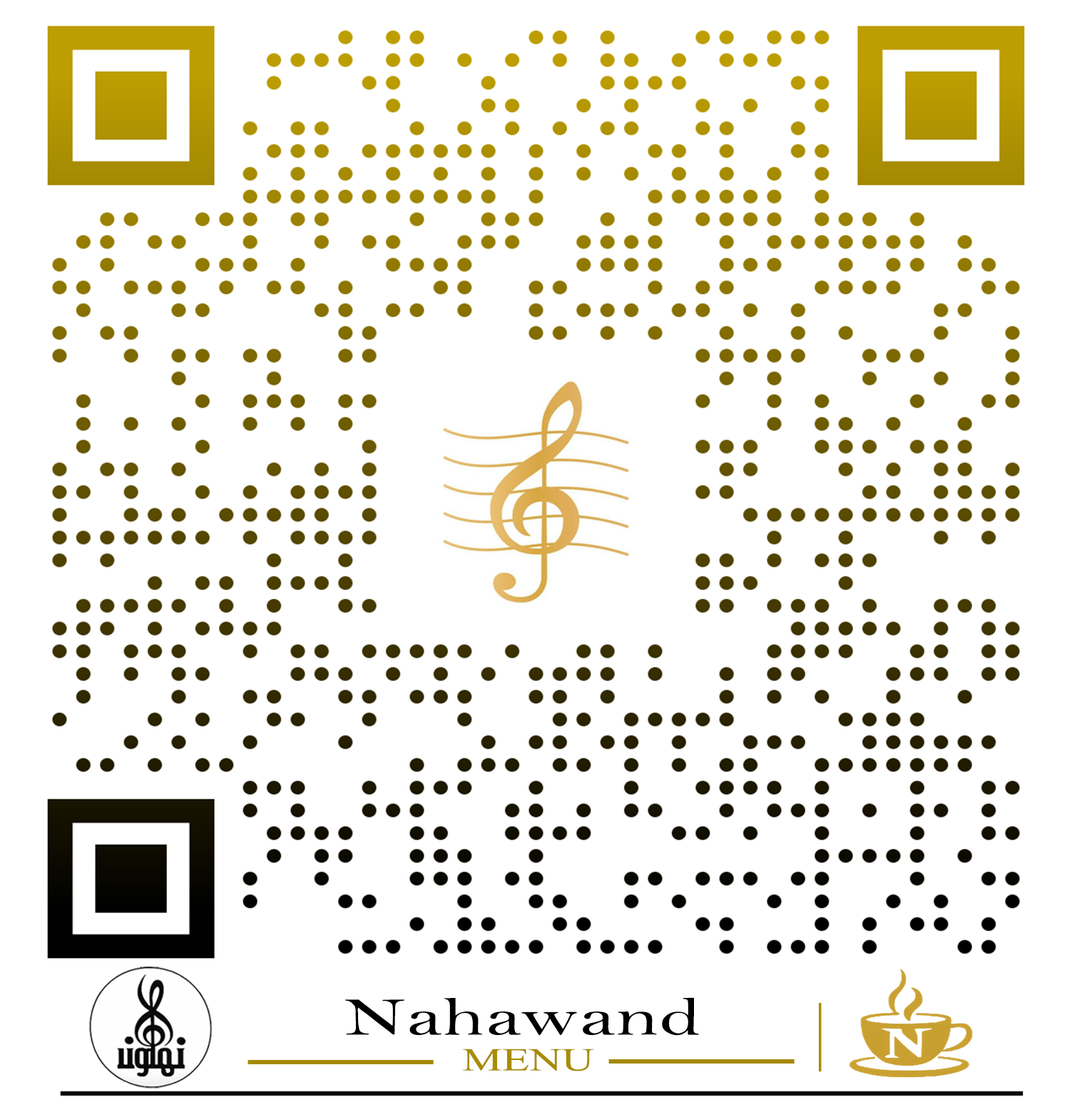
<style>
.page{position:relative;width:1072px;height:1112px;background:#ffffff}
.page>*{position:absolute;margin:0}
.t1{font:55px "BellMT";color:#000000;scale:1.5 1}
.t2{font:73.3px "BellMT";color:#a78c02;scale:0.72 1}
.t3{font:32.1px "TimesNewRomanPSMT";color:#a88c02;scale:1.39 1}
.t4{font:61.4px "TimesNewRomanPS-BoldMT";color:#a58a02}
.t5{font:61.4px "TimesNewRomanPS-BoldMT";color:#000000;scale:5.19 1}
</style>
<div class="page">
<p class="t1" style="left:344px;top:998px;width:355px;height:38px">Nahawand</p>
<p class="t2" style="left:819px;top:1003px;width:3px;height:70px">|</p>
<p class="t3" style="left:463px;top:1049px;width:130px;height:23px">MENU</p>
<p class="t4" style="left:247px;top:1060px;width:187px;height:5px">______</p>
<p class="t4" style="left:608px;top:1060px;width:186px;height:4px">______</p>
<p class="t5" style="left:60px;top:1092px;width:963px;height:4px">______</p>
</div>
